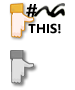
<style>
.page{position:relative;width:75px;height:90px;background:#ffffff}
.page>*{position:absolute;margin:0}
.t1{font:20px "Gisha-Bold";color:#000000;text-transform:uppercase}
.t2{font:13px "Gisha-Bold";color:#000000;text-transform:uppercase}
</style>
<div class="page">
<p class="t1" style="left:26px;top:4px;width:12px;height:13px">#</p>
<p class="t2" style="left:28px;top:23px;width:33px;height:11px"><span class="t1"> <br></span>this!</p>
</div>
